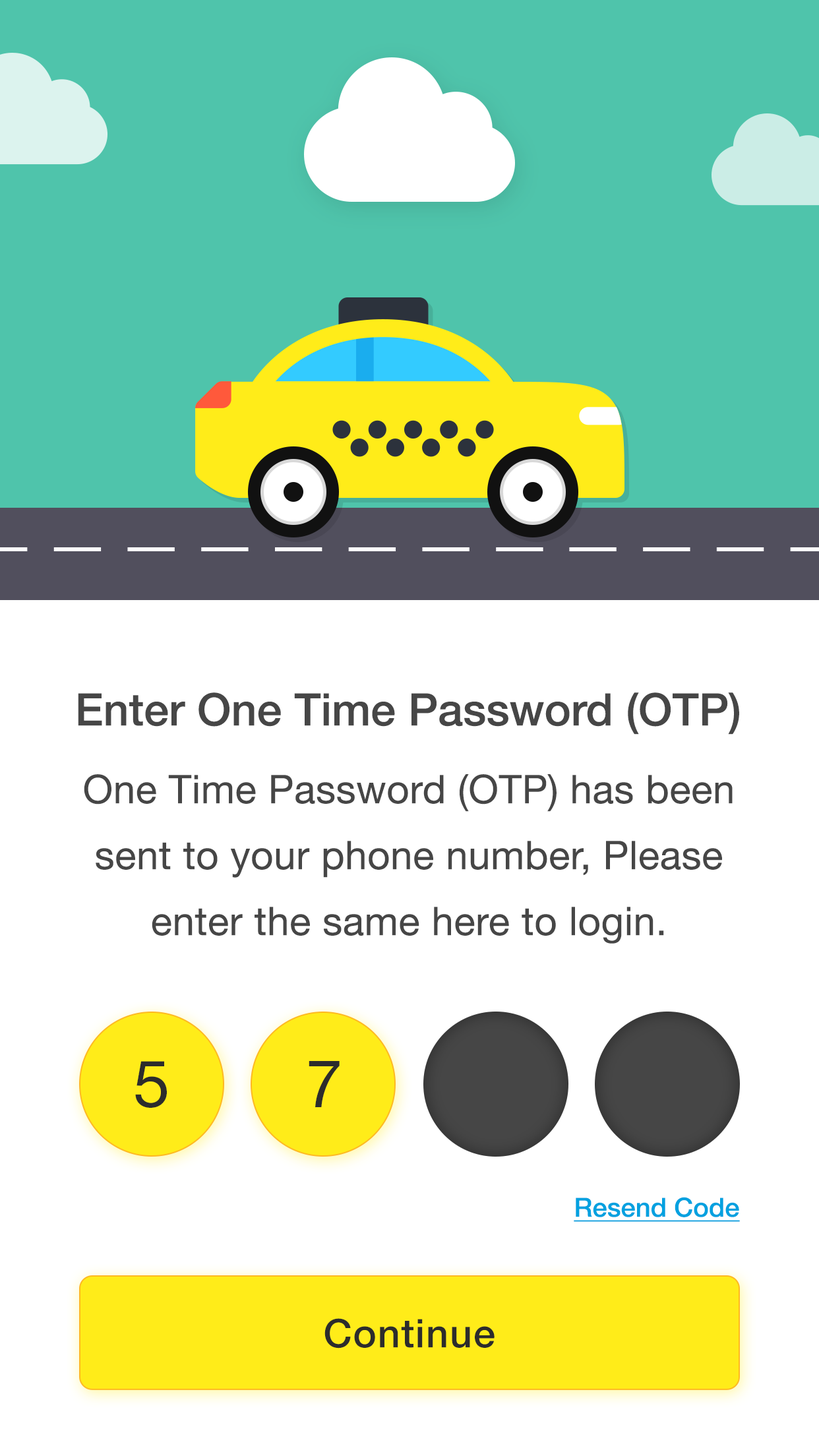
<style>
.page{position:relative;width:819px;height:1456px;background:#ffffff}
.page>*{position:absolute;margin:0}
.t1{font:44.8px "HelveticaNeueLTStd-Md";color:#464646}
.t2{font:39.6px/65.9px "HelveticaNeueLTStd-Roman";letter-spacing:0.01em;color:#464646}
.t3{font:65.9px "HelveticaNeueLTStd-Roman";letter-spacing:0.025em;color:#2c2c2c}
.t4{font:26.4px "HelveticaNeueLTStd-Md";color:#00a1e0;text-decoration:underline}
.t5{font:39.6px "HelveticaNeueLTStd-Md";letter-spacing:0.025em;color:#2c2c2c}
</style>
<div class="page">
<p class="t1" style="left:78px;top:692px;width:661px;height:43px">Enter One Time Password (OTP)</p>
<p class="t2" style="left:84px;top:774px;width:649px;height:170px;text-align:center">One Time Password (OTP) has been<br>sent to your phone number, Please<br>enter the same here to login.</p>
<p class="t3" style="left:135px;top:1061px;width:32px;height:47px">5</p>
<p class="t3" style="left:309px;top:1061px;width:31px;height:46px">7</p>
<p class="t4" style="left:574px;top:1197px;width:166px;height:25px">Resend Code</p>
<p class="t5" style="left:324px;top:1318px;width:171px;height:30px">Continue</p>
</div>
